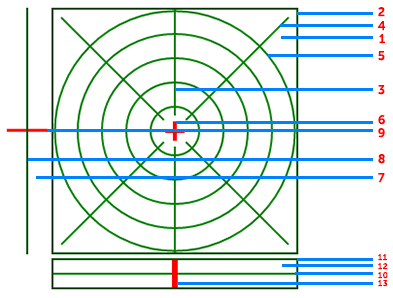
<style>
.page{position:relative;width:393px;height:298px;background:#ffffff}
.page>*{position:absolute;margin:0}
.t1{font:12.5px "MuseoSansCyrl-700";letter-spacing:0.075em;color:#ff0000}
.t2{font:8.3px "MuseoSansCyrl-700";letter-spacing:0.075em;color:#ff0000}
</style>
<div class="page">
<p class="t1" style="left:378px;top:7px;width:7px;height:10px">2</p>
<p class="t1" style="left:378px;top:21px;width:8px;height:10px">4</p>
<p class="t1" style="left:379px;top:34px;width:6px;height:10px">1</p>
<p class="t1" style="left:378px;top:51px;width:7px;height:10px">5</p>
<p class="t1" style="left:378px;top:85px;width:7px;height:10px">3</p>
<p class="t1" style="left:378px;top:115px;width:7px;height:10px">6</p>
<p class="t1" style="left:378px;top:128px;width:7px;height:10px">9</p>
<p class="t1" style="left:378px;top:154px;width:7px;height:10px">8</p>
<p class="t1" style="left:378px;top:173px;width:7px;height:10px">7</p>
<p class="t2" style="left:378px;top:254px;width:9px;height:7px">11</p>
<p class="t2" style="left:378px;top:263px;width:10px;height:7px">12</p>
<p class="t2" style="left:378px;top:272px;width:10px;height:7px">10</p>
<p class="t2" style="left:378px;top:280px;width:10px;height:7px">13</p>
</div>
